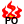
<style>
.page{position:relative;width:24px;height:24px;background:#ffffff}
.page>*{position:absolute;margin:0}
.t1{font:9px "Arial-BoldMT";color:#000000}
</style>
<div class="page">
<p class="t1" style="left:5px;top:17px;width:13px;height:7px">PO</p>
</div>
